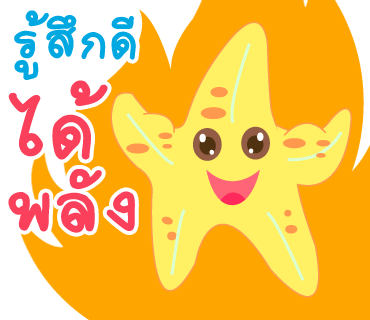
<style>
.page{position:relative;width:370px;height:320px;background:#ffa500}
.page>*{position:absolute;margin:0}
.t1{font:76px "2005_iannnnnMTV";letter-spacing:0.025em;color:#00a8e1;scale:1.06 1}
.t2{font:122px "2005_iannnnnMTV";letter-spacing:0.025em;color:#fa405a;scale:1.06 1}
.t3{font:109px "2005_iannnnnMTV";letter-spacing:0.025em;color:#fa405a;scale:1.06 1}
</style>
<div class="page">
<p class="t1" style="left:14px;top:10px;width:122px;height:70px">รู้สึกดี</p>
<p class="t2" style="left:8px;top:80px;width:100px;height:80px">ได้</p>
<p class="t3" style="left:8px;top:169px;width:127px;height:64px">พลัง</p>
</div>
